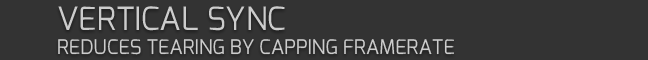
<style>
.page{position:relative;width:648px;height:60px;background:#333333}
.page>*{position:absolute;margin:0}
.t1{font:20px "Exo-Regular";color:#cccccc;text-transform:uppercase}
.t2{font:32px "Exo-Regular";color:#cccccc;text-transform:uppercase}
</style>
<div class="page">
<p class="t1" style="left:58px;top:6px;width:396px;height:49px"><span class="t2">Vertical Sync<br></span>Reduces tearing by capping framerate</p>
</div>
